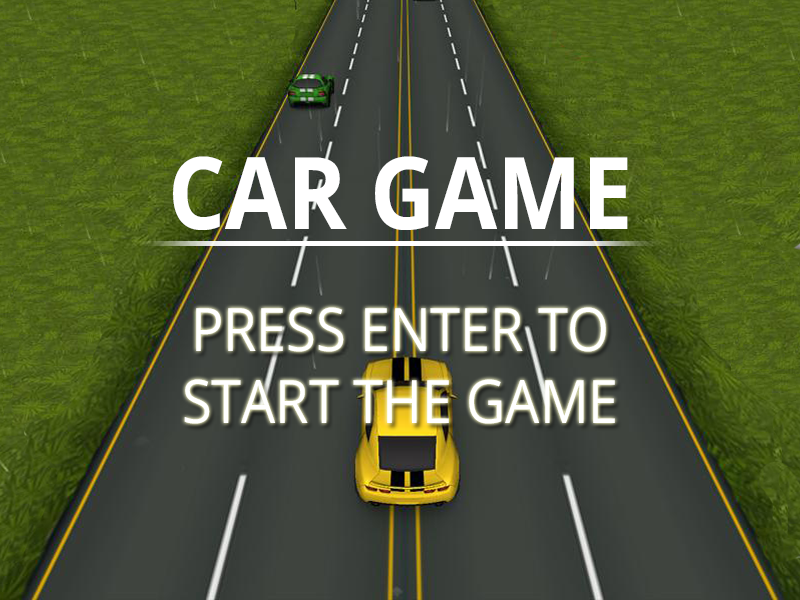
<style>
.page{position:relative;width:800px;height:600px}
.page>*{position:absolute;margin:0}
.t1{font:100.2px "OpenSans-Bold";color:#ffffff;scale:0.9 1}
.t2{font:60px "OpenSans";color:#ffffff;scale:0.9 1}
</style>
<div class="page">
<p class="t1" style="left:173px;top:156px;width:455px;height:74px">CAR GAME</p>
<p class="t2" style="left:184px;top:307px;width:431px;height:117px;text-align:center">PRESS ENTER TO<br>START THE GAME</p>
</div>
